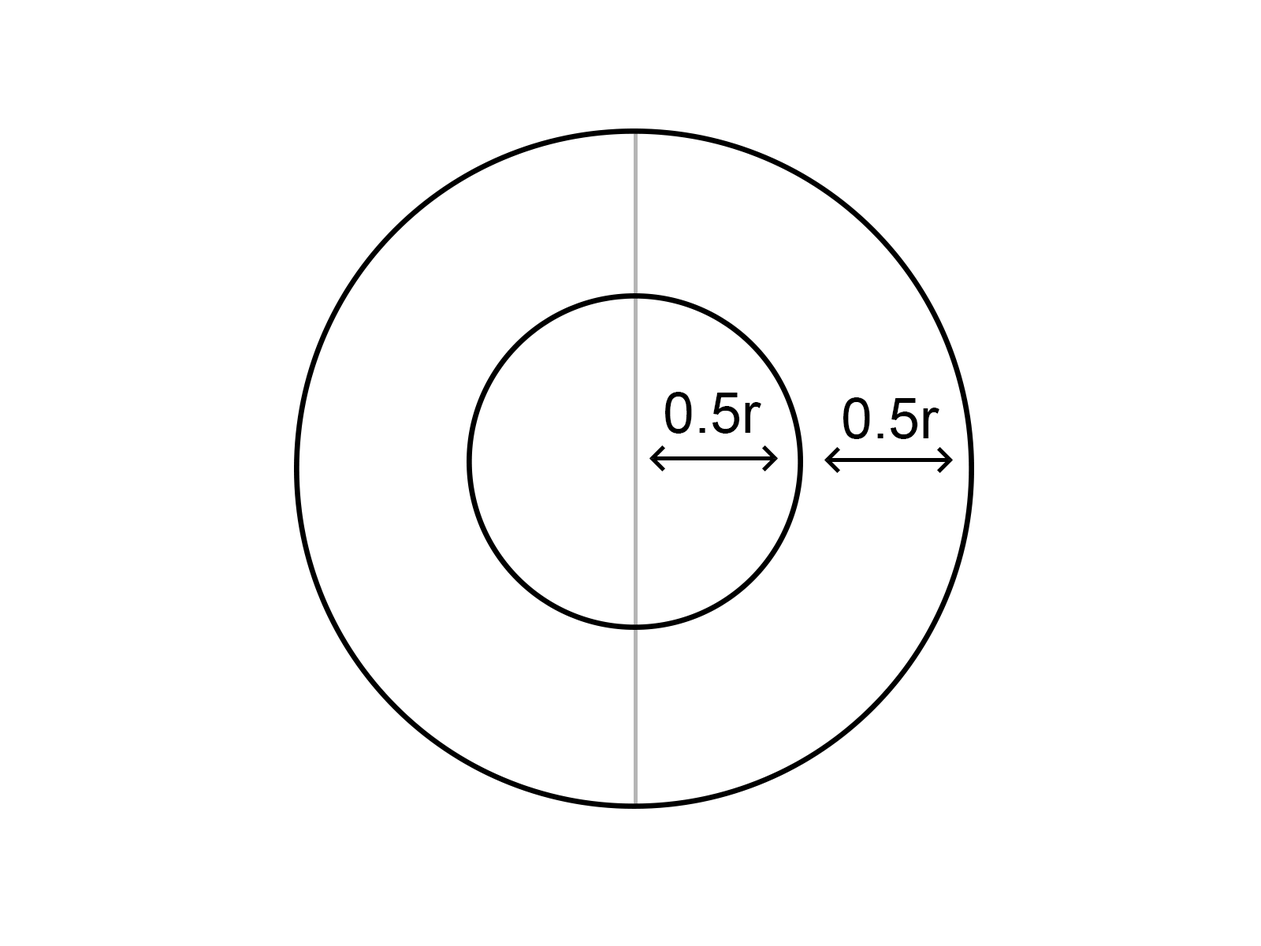
<style>
.page{position:relative;width:1261px;height:946px;background:#ffffff}
.page>*{position:absolute;margin:0}
.t1{font:56.7px "ArialMT";color:#000000}
</style>
<div class="page">
<p class="t1" style="left:665px;top:392px;width:96px;height:41px">0.5r</p>
<p class="t1" style="left:843px;top:397px;width:96px;height:42px">0.5r</p>
</div>
